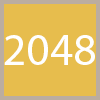
<style>
.page{position:relative;width:100px;height:100px;background:#e7bd4d}
.page>*{position:absolute;margin:0}
.t1{font:45.8px "MyriadPro-Regular";color:#ffffff}
</style>
<div class="page">
<p class="t1" style="left:4px;top:35px;width:91px;height:30px">2048</p>
</div>
